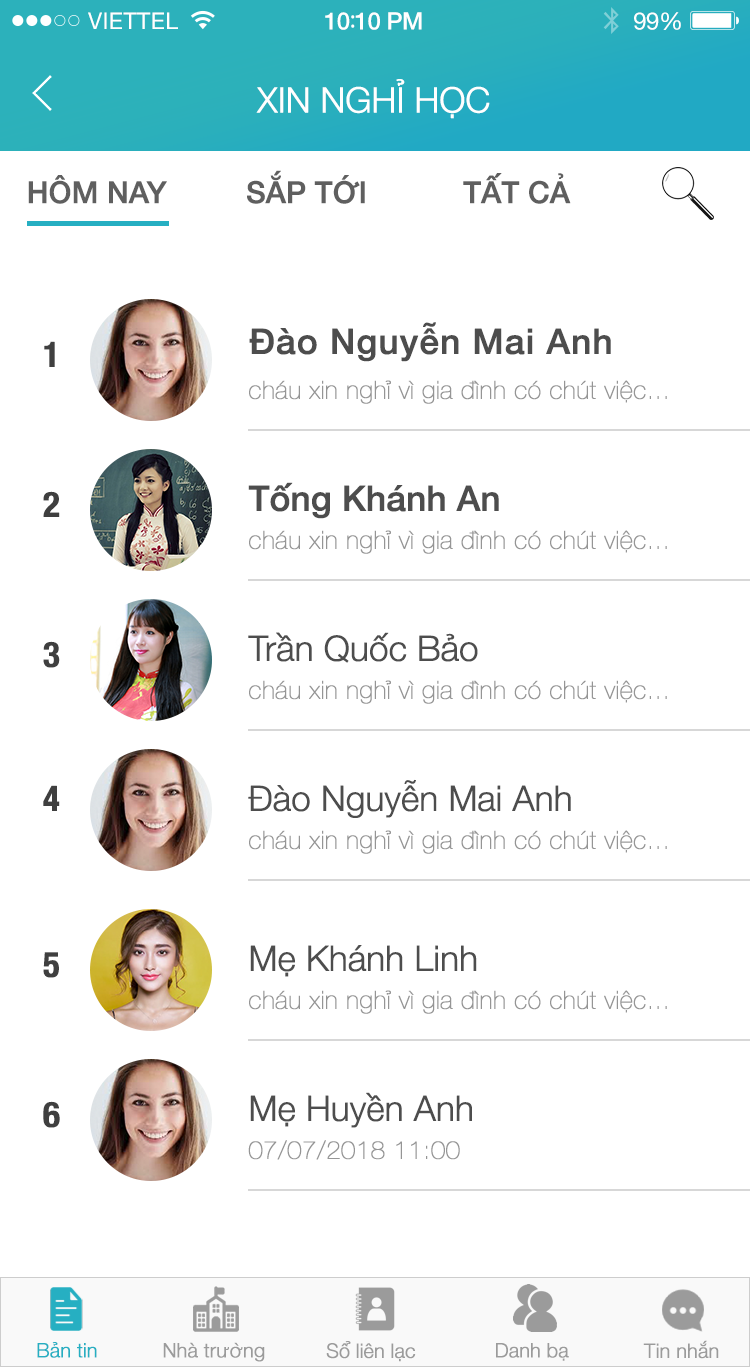
<style>
.page{position:relative;width:750px;height:1367px;background:#ffffff}
.page>*{position:absolute;margin:0}
.t1{font:23px "HelveticaNeue";letter-spacing:0.02em;color:#ffffff}
.t2{font:24px "HelveticaNeue-Medium";letter-spacing:-0.02em;color:#ffffff}
.t3{font:26px "MyriadPro-Regular";letter-spacing:-0.02em;color:#ffffff}
.t4{font:24px "HelveticaNeue";letter-spacing:-0.02em;color:#ffffff}
.t5{font:35px "HelveticaNeue-Light";letter-spacing:-0.02em;color:#ffffff;font-weight:bold}
.t6{font:30px "HelveticaNeue-Medium";letter-spacing:-0.02em;color:#5f5f5f;font-weight:bold}
.t7{font:35px "HelveticaNeue-Medium";letter-spacing:0.01em;color:#4d4d4d;font-weight:bold}
.t8{font:35px "HelveticaNeue-CondensedBold";letter-spacing:0.01em;color:#3f3f3f;font-weight:bold}
.t9{font:25px "HelveticaNeue-UltraLight";letter-spacing:0.01em;color:#959595;font-weight:bold}
.t10{font:35px "HelveticaNeue-Medium";letter-spacing:-0.02em;color:#4d4d4d;font-weight:bold}
.t11{font:35px "HelveticaNeue-Light";letter-spacing:-0.02em;color:#4d4d4d;font-weight:bold}
.t12{font:20px "HelveticaNeue-Light";letter-spacing:-0.02em;color:#26afc2;font-weight:bold}
.t13{font:20px "HelveticaNeue-Light";letter-spacing:-0.02em;color:#9b9b9b;font-weight:bold}
</style>
<div class="page">
<p class="t1" style="left:88px;top:12px;width:90px;height:17px">VIETTEL</p>
<p class="t2" style="left:325px;top:12px;width:97px;height:18px">10<span class="t3">:</span>10 PM</p>
<p class="t4" style="left:634px;top:12px;width:47px;height:18px">99%</p>
<p class="t5" style="left:256px;top:79px;width:234px;height:40px">XIN NGHỈ HỌC</p>
<p class="t6" style="left:247px;top:170px;width:118px;height:34px">SẮP TỚI</p>
<p class="t6" style="left:463px;top:173px;width:108px;height:31px">TẤT CẢ</p>
<p class="t6" style="left:28px;top:175px;width:139px;height:29px">HÔM NAY</p>
<p class="t7" style="left:249px;top:322px;width:362px;height:40px">Đào Nguyễn Mai Anh</p>
<p class="t8" style="left:44px;top:341px;width:11px;height:26px">1</p>
<p class="t9" style="left:249px;top:380px;width:418px;height:24px">cháu xin nghỉ vì gia đình có chút việc...</p>
<p class="t10" style="left:248px;top:482px;width:251px;height:37px">Tống Khánh An</p>
<p class="t8" style="left:43px;top:491px;width:17px;height:26px">2</p>
<p class="t9" style="left:249px;top:530px;width:418px;height:24px">cháu xin nghỉ vì gia đình có chút việc...</p>
<p class="t8" style="left:43px;top:641px;width:17px;height:27px">3</p>
<p class="t11" style="left:248px;top:632px;width:230px;height:31px">Trần Quốc Bảo</p>
<p class="t9" style="left:249px;top:680px;width:418px;height:24px">cháu xin nghỉ vì gia đình có chút việc...</p>
<p class="t8" style="left:43px;top:785px;width:17px;height:26px">4</p>
<p class="t11" style="left:248px;top:779px;width:323px;height:39px">Đào Nguyễn Mai Anh</p>
<p class="t9" style="left:249px;top:830px;width:418px;height:24px">cháu xin nghỉ vì gia đình có chút việc...</p>
<p class="t8" style="left:43px;top:952px;width:16px;height:26px">5</p>
<p class="t11" style="left:250px;top:945px;width:227px;height:32px">Mẹ Khánh Linh</p>
<p class="t9" style="left:249px;top:990px;width:418px;height:24px">cháu xin nghỉ vì gia đình có chút việc...</p>
<p class="t11" style="left:250px;top:1092px;width:222px;height:36px">Mẹ Huyền Anh</p>
<p class="t8" style="left:43px;top:1101px;width:17px;height:27px">6</p>
<p class="t9" style="left:248px;top:1140px;width:212px;height:20px">07/07/2018 11:00</p>
<p class="t12" style="left:37px;top:1342px;width:60px;height:16px">Bản tin</p>
<p class="t13" style="left:163px;top:1342px;width:102px;height:20px">Nhà trường</p>
<p class="t13" style="left:326px;top:1341px;width:90px;height:21px">Sổ liên lạc</p>
<p class="t13" style="left:496px;top:1343px;width:73px;height:18px">Danh bạ</p>
<p class="t13" style="left:643px;top:1340px;width:76px;height:19px">Tin nhắn</p>
</div>
